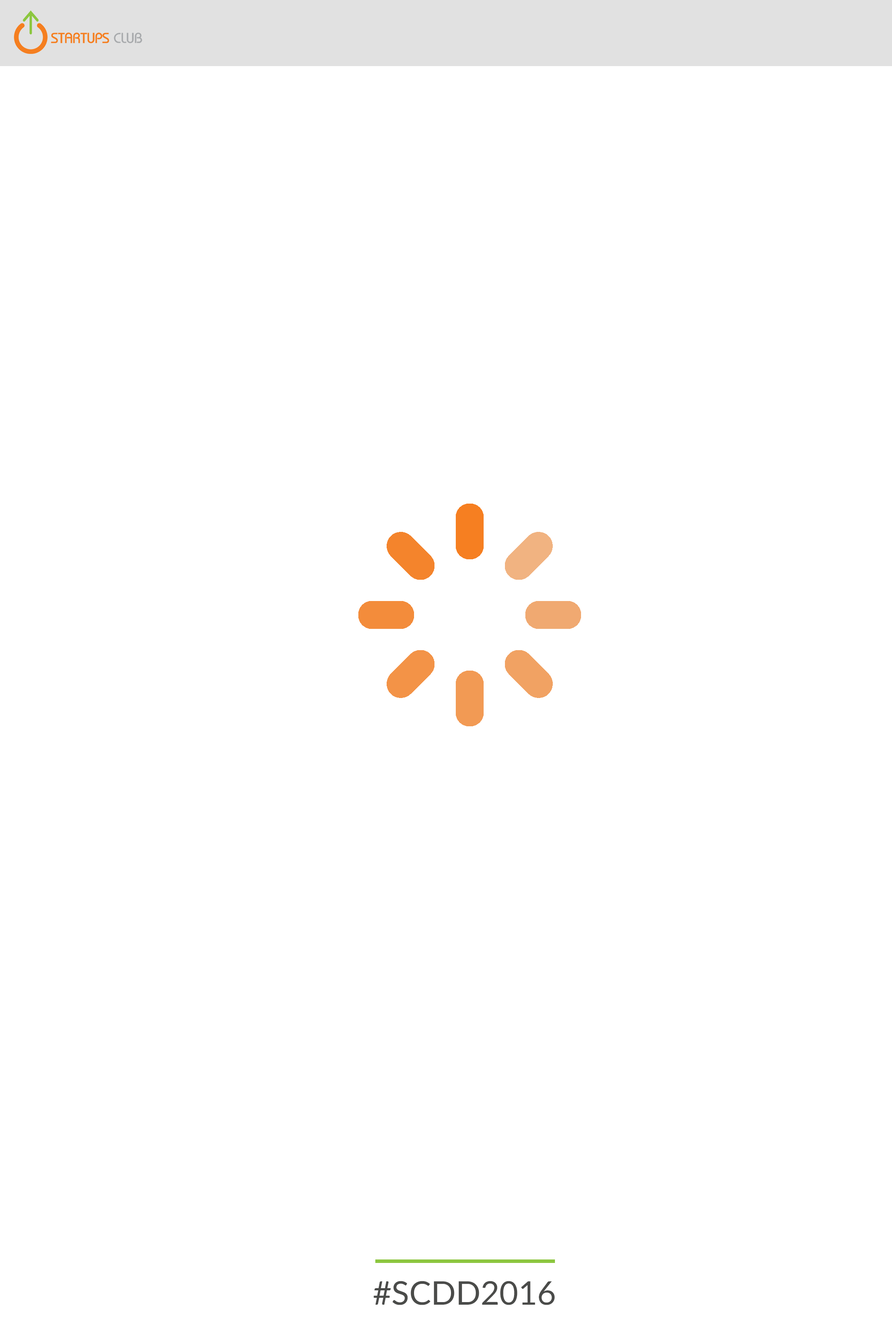
<style>
.page{position:relative;width:892px;height:1336px;background:#ffffff}
.page>*{position:absolute;margin:0}
.t1{font:32.6px "Lato-Regular";color:#4a4b49}
</style>
<div class="page">
<p class="t1" style="left:374px;top:1281px;width:181px;height:25px">#SCDD2016</p>
</div>
